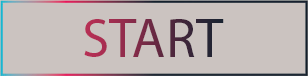
<style>
.page{position:relative;width:308px;height:76px;background:#cbc3c0}
.page>*{position:absolute;margin:0}
.t1{font:55px "MyriadPro-Regular"}
</style>
<div class="page">
<p class="t1" style="left:84px;top:19px;width:140px;height:38px">START</p>
</div>
